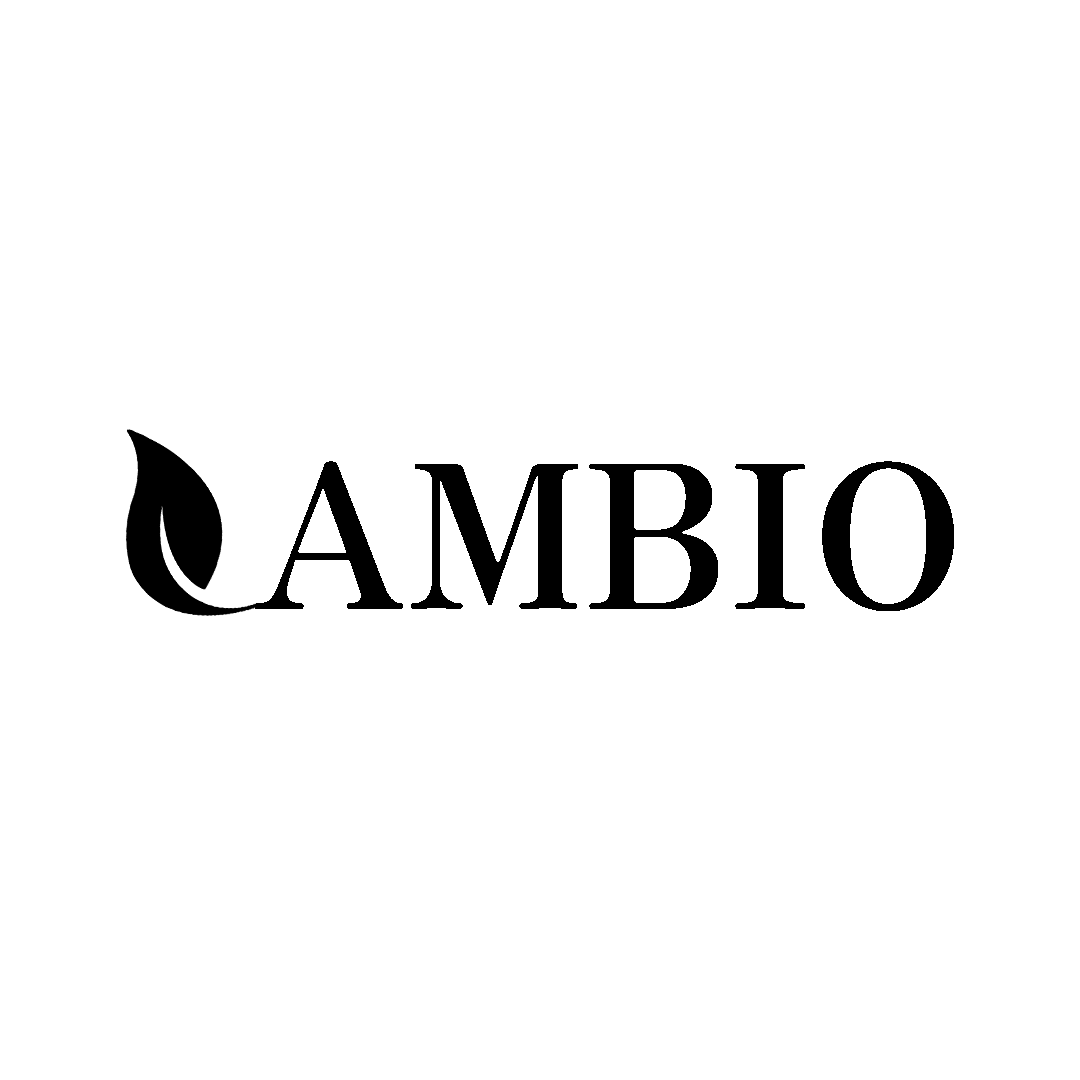
<style>
.page{position:relative;width:1080px;height:1080px;background:#ffffff}
.page>*{position:absolute;margin:0}
.t1{font:200px "ZenAntiqueSoft-Regular";color:#000000}
</style>
<div class="page">
<p class="t1" style="left:255px;top:461px;width:699px;height:150px">AMBIO</p>
</div>
